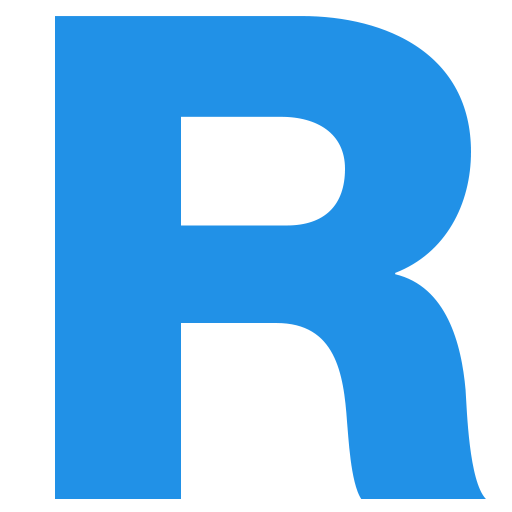
<style>
.page{position:relative;width:512px;height:512px;background:#2191e7}
.page>*{position:absolute;margin:0}
.t1{font:676.9px "HelveticaNeueLTStd-Hv";color:#2191e7}
</style>
<div class="page">
<p class="t1" style="left:55px;top:16px;width:431px;height:483px">R</p>
</div>
